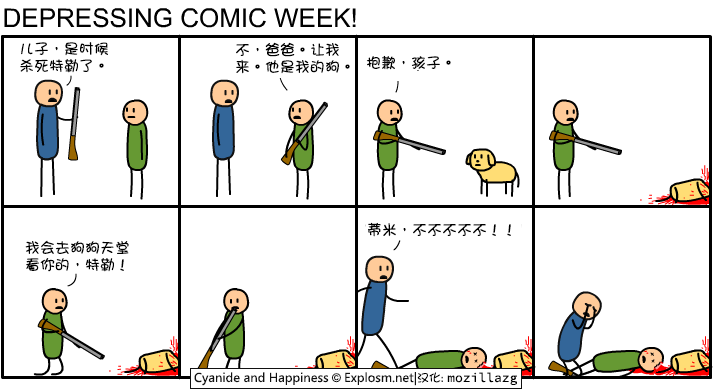
<style>
.page{position:relative;width:713px;height:389px;background:#ffffff}
.page>*{position:absolute;margin:0}
.t1{font:15px/17px "DFGirl";color:#000000}
.t2{font:15px "DFGirl";color:#000000}
</style>
<div class="page">
<p class="t1" style="left:20px;top:42px;width:88px;height:31px">儿子，是时候<br>杀死特勒了。</p>
<p class="t1" style="left:236px;top:42px;width:114px;height:32px">不，爸爸。让我<br>来。他是我的狗。</p>
<p class="t2" style="left:366px;top:55px;width:85px;height:15px">抱歉，孩子。</p>
<p class="t2" style="left:368px;top:222px;width:143px;height:15px">蒂米，不不不不不！！</p>
<p class="t1" style="left:25px;top:240px;width:104px;height:32px">我会去狗狗天堂<br>看你的，特勒！</p>
</div>
